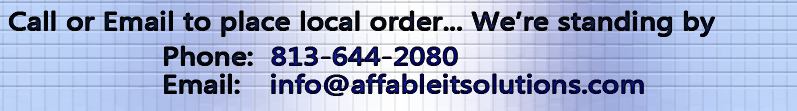
<style>
.page{position:relative;width:797px;height:111px}
.page>*{position:absolute;margin:0}
.t1{font:25.8px "MicrosoftNewTaiLue";letter-spacing:-0.01em;color:#000000;font-weight:bold;scale:1.14 1}
.t2{font:25.8px/28px "MicrosoftNewTaiLue";letter-spacing:-0.01em;color:#000066;font-weight:bold;scale:1.14 1}
.t3{font:25.8px/28px "MicrosoftNewTaiLue";letter-spacing:-0.01em;color:#000000;font-weight:bold;scale:1.14 1}
</style>
<div class="page">
<p class="t1" style="left:9px;top:11px;width:706px;height:26px">Call or Email to place local order... We’re standing by</p>
<p class="t2" style="left:164px;top:46px;width:480px;height:50px"><span class="t3">Phone:  </span>813-644-2080<br><span class="t3">Email: </span>info@affableitsolutions.com</p>
</div>
